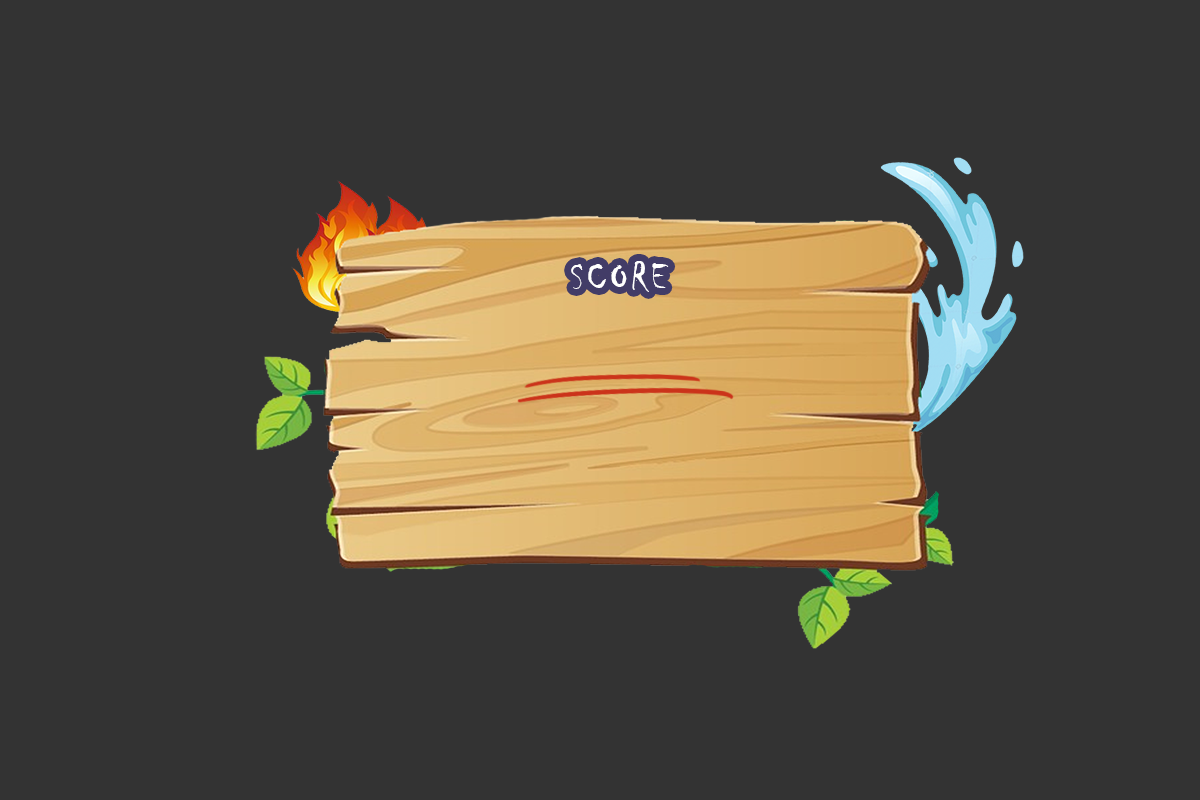
<style>
.page{position:relative;width:1200px;height:800px;background:#333333}
.page>*{position:absolute;margin:0}
.t1{font:41.7px "Chiller-Regular";letter-spacing:0.1em;color:#ffffff;scale:0.9 1}
</style>
<div class="page">
<p class="t1" style="left:571px;top:261px;width:98px;height:31px">SCORE</p>
</div>
